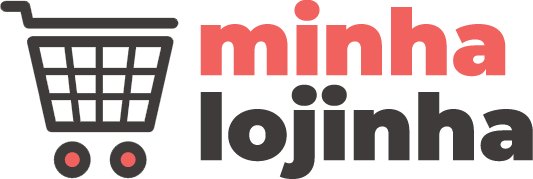
<style>
.page{position:relative;width:533px;height:179px;background:#ffffff}
.page>*{position:absolute;margin:0}
.t1{font:92px/85px "Montserrat-Black";color:#3e3b3a}
.t2{font:92px/85px "Montserrat-Black";color:#f1625f}
</style>
<div class="page">
<p class="t1" style="left:200px;top:0px;width:333px;height:179px"><span class="t2">minha<br></span>lojinha</p>
</div>
